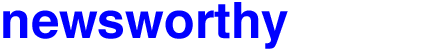
<style>
.page{position:relative;width:435px;height:50px;background:#ffffff}
.page>*{position:absolute;margin:0}
.t1{font:50px "Helvetica-Bold";color:#0000ff}
.t2{font:50px "Helvetica-Bold";color:#ffffff}
</style>
<div class="page">
<p class="t1" style="left:3px;top:2px;width:428px;height:47px">newsworthy<span class="t2">vision</span></p>
</div>
